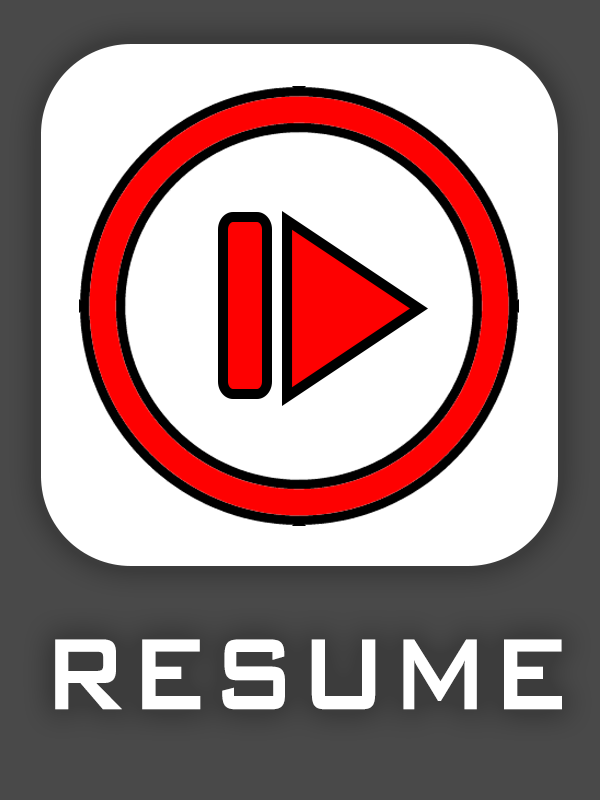
<style>
.page{position:relative;width:600px;height:800px;background:#ffffff}
.page>*{position:absolute;margin:0}
.t1{font:134.8px "BankGothicBT-Medium";color:#ffffff;scale:0.8 1}
</style>
<div class="page">
<p class="t1" style="left:55px;top:639px;width:507px;height:71px">RESUME</p>
</div>
